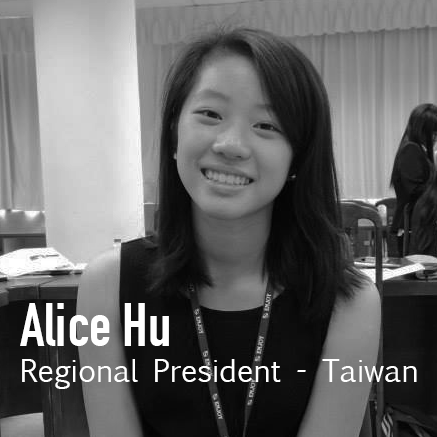
<style>
.page{position:relative;width:437px;height:437px}
.page>*{position:absolute;margin:0}
.t1{font:30px "EuphemiaUCAS";color:#ffffff}
.t2{font:60px "DINCondensed-Bold";color:#ffffff}
</style>
<div class="page">
<p class="t1" style="left:20px;top:303px;width:397px;height:86px"><span class="t2">Alice Hu<br></span>Regional President - Taiwan</p>
</div>
